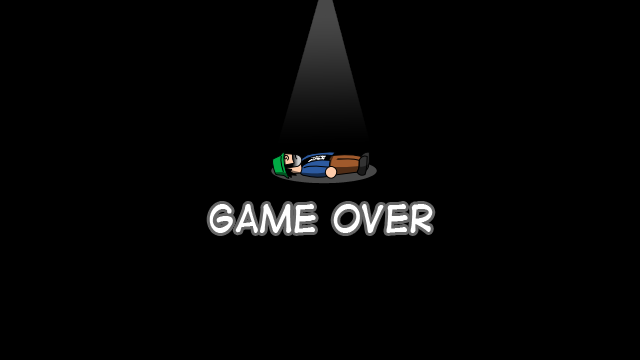
<style>
.page{position:relative;width:640px;height:360px;background:#000000}
.page>*{position:absolute;margin:0}
.t1{font:36px "DigitalStrip";color:#ffffff}
</style>
<div class="page">
<p class="t1" style="left:209px;top:204px;width:224px;height:29px">game over</p>
</div>
